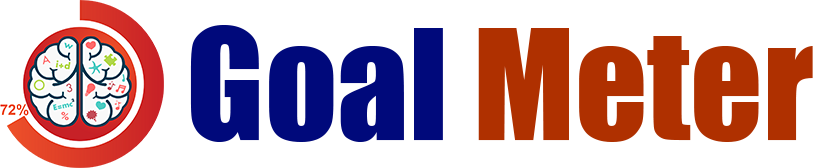
<style>
.page{position:relative;width:824px;height:168px;background:#ffffff}
.page>*{position:absolute;margin:0}
.t1{font:141.7px "Impact";color:#b03000}
.t2{font:141.7px "Impact";color:#00097b}
</style>
<div class="page">
<p class="t1" style="left:190px;top:25px;width:623px;height:117px"><span class="t2">Goal</span> Meter</p>
</div>
